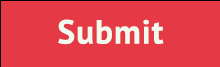
<style>
.page{position:relative;width:220px;height:67px;background:#e63946}
.page>*{position:absolute;margin:0}
.t1{font:33.3px "PTSans-Bold";letter-spacing:0.03em;color:#f1faee}
</style>
<div class="page">
<p class="t1" style="left:58px;top:19px;width:106px;height:26px">Submit</p>
</div>
